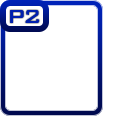
<style>
.page{position:relative;width:128px;height:128px;background:#ffffff}
.page>*{position:absolute;margin:0}
.t1{font:24.2px "BankGothicBT-Medium";letter-spacing:-0.08em;color:#0020af}
</style>
<div class="page">
<p class="t1" style="left:10px;top:10px;width:30px;height:13px">P2</p>
</div>
